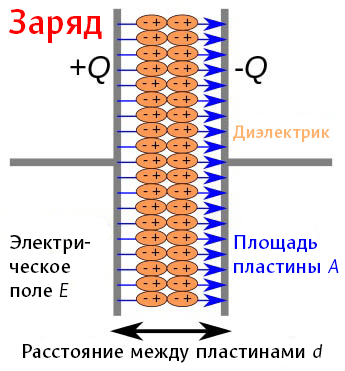
<style>
.page{position:relative;width:345px;height:371px;background:#ffffff}
.page>*{position:absolute;margin:0}
.t1{font:36px "Mezzo-Bold";color:#ff0000}
.t2{font:18px "Mezzo-Bold";color:#ffb26c}
.t3{font:20px "Mezzo-Bold";color:#000000}
.t4{font:20px "Mezzo-Italic";color:#000000}
.t5{font:20px "Mezzo-Bold";color:#0404f5}
.t6{font:20px "Mezzo-Italic";color:#0404f5}
</style>
<div class="page">
<p class="t1" style="left:8px;top:9px;width:94px;height:34px">Заряд</p>
<p class="t2" style="left:233px;top:125px;width:97px;height:17px">Диэлектрик</p>
<p class="t3" style="left:9px;top:235px;width:81px;height:62px">Электри-<br>ческое<br>поле <span class="t4">Е</span></p>
<p class="t5" style="left:234px;top:235px;width:105px;height:38px">Площадь<br>пластины <span class="t6">А</span></p>
<p class="t3" style="left:22px;top:344px;width:301px;height:19px">Расстояние между пластинами<span class="t4"> d</span></p>
</div>
